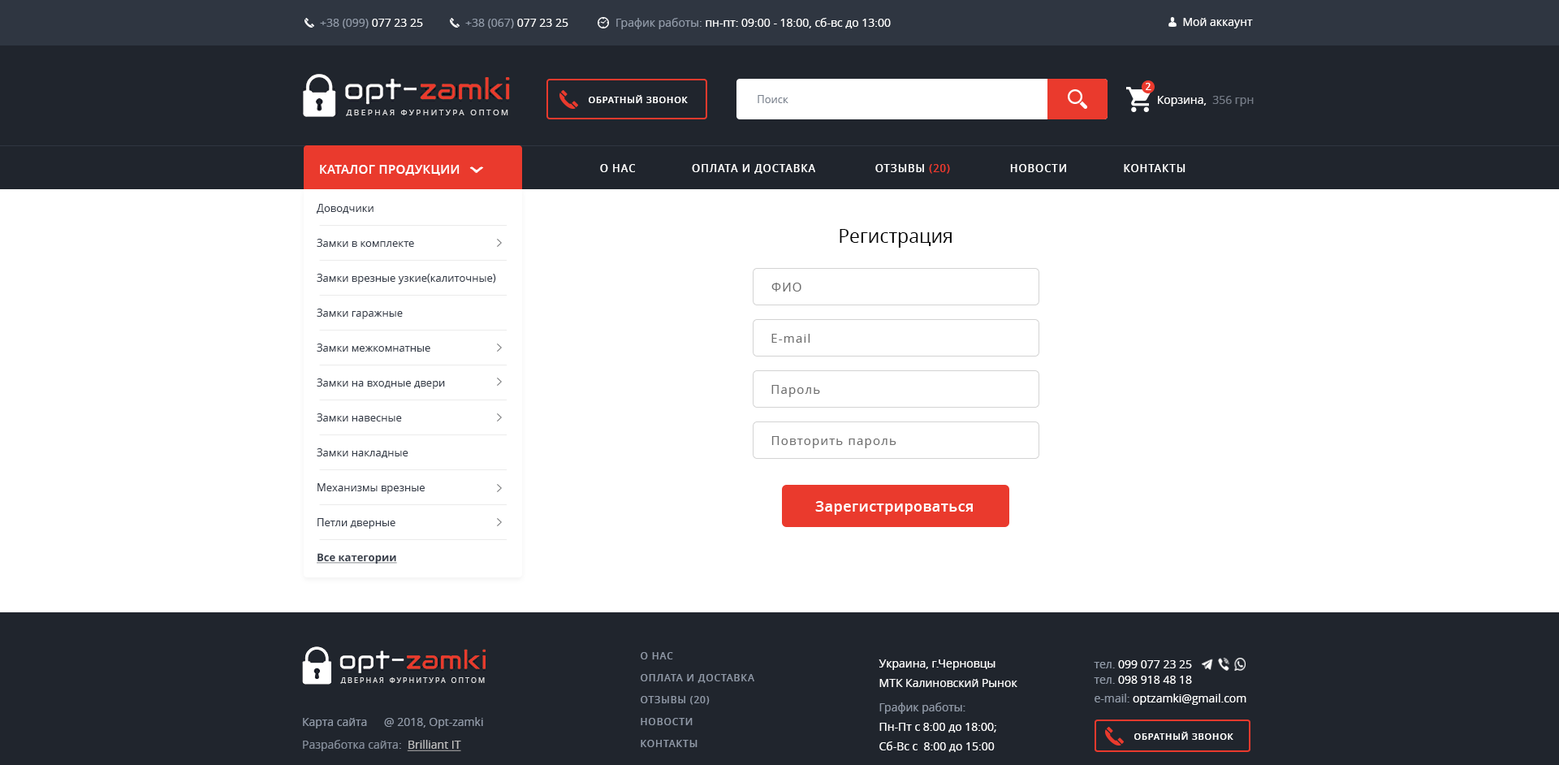
<style>
.page{position:relative;width:1559px;height:765px;background:#ffffff}
.page>*{position:absolute;margin:0}
.t1{font:11.4px "OpenSans";color:#ffffff}
.t2{font:11.4px "OpenSans";color:#9099a7}
.t3{font:9.8px "OpenSans-Semibold";color:#ffffff}
.t4{font:8.9px "OpenSans-Semibold";letter-spacing:0.075em;color:#ffffff;text-transform:uppercase}
.t5{font:10.6px "OpenSans";color:#79818d}
.t6{font:11.4px "OpenSans";color:#747b86}
.t7{font:8px "OpenSans";letter-spacing:0.26em;color:#dfdfe0;text-transform:uppercase}
.t8{font:12.2px "OpenSans-Semibold";letter-spacing:0.025em;color:#ffffff;text-transform:uppercase}
.t9{font:10.6px "OpenSans-Semibold";letter-spacing:0.07em;color:#ffffff;text-transform:uppercase}
.t10{font:10.6px "OpenSans-Semibold";letter-spacing:0.07em;color:#ea3a2d;text-transform:uppercase}
.t11{font:10.6px/34.9px "OpenSans";color:#373e4a}
.t12{font:10.6px/34.9px "OpenSans-Bold";color:#373e4a;text-decoration:underline}
.t13{font:18.6px "OpenSans";color:#000000}
.t14{font:12.2px "OpenSans";letter-spacing:0.075em;color:#6f6f6f}
.t15{font:14.6px "OpenSans-Semibold";letter-spacing:0.02em;color:#ffffff}
.t16{font:9.7px/21.9px "OpenSans-Semibold";letter-spacing:0.07em;color:#9099a7;text-transform:uppercase}
.t17{font:11.4px/19.5px "OpenSans";color:#ffffff}
.t18{font:11.4px/24.4px "OpenSans";color:#9099a7}
.t19{font:11.4px/18.7px "OpenSans";color:#ffffff}
.t20{font:11.4px/18.7px "OpenSans";color:#9099a7}
.t21{font:11.4px/15.4px "OpenSans";color:#ffffff}
.t22{font:11.4px/15.4px "OpenSans";color:#9099a7}
.t23{font:7.1px "OpenSans";letter-spacing:0.26em;color:#dfdfe0;text-transform:uppercase}
.t24{font:11.4px "OpenSans";color:#868f9c}
.t25{font:11.4px "OpenSans";color:#bebebe;text-decoration:underline}
</style>
<div class="page">
<p class="t1" style="left:616px;top:18px;width:275px;height:11px"><span class="t2">График работы: </span>пн-пт: 09:00 - 18:00, сб-вс до 13:00</p>
<p class="t1" style="left:1183px;top:18px;width:70px;height:10px">Мой аккаунт</p>
<p class="t2" style="left:320px;top:19px;width:103px;height:9px">+38 (099)<span class="t1"> 077 23 25</span></p>
<p class="t2" style="left:465px;top:19px;width:103px;height:9px">+38 (067)<span class="t1"> 077 23 25</span></p>
<p class="t3" style="left:1146px;top:83px;width:5px;height:7px">2</p>
<p class="t4" style="left:589px;top:95px;width:99px;height:8px">Обратный звонок</p>
<p class="t5" style="left:758px;top:95px;width:30px;height:8px">Поиск</p>
<p class="t1" style="left:1158px;top:96px;width:96px;height:10px">Корзина,  <span class="t6">356 грн</span></p>
<p class="t7" style="left:346px;top:110px;width:162px;height:6px">Дверная фурнитура оптом</p>
<p class="t8" style="left:320px;top:165px;width:140px;height:10px">каталог продукции</p>
<p class="t9" style="left:600px;top:164px;width:585px;height:10px">о нас                оплата и доставка                 Отзывы <span class="t10">(20) </span>                НОВОСТИ                Контакты</p>
<p class="t11" style="left:317px;top:204px;width:179px;height:360px">Доводчики<br>Замки в комплекте<br>Замки врезные узкие(калиточные)<br>Замки гаражные<br>Замки межкомнатные<br>Замки на входные двери<br>Замки навесные<br>Замки накладные<br>Механизмы врезные<br>Петли дверные<br><span class="t12">Все категории<br></span>Ручки защолка кноб<br>Ручки на планке<br>Ручки на розете<br>Сердцевины<br>Скобяные изделия<br>Уплотнитель<br>Хомуты пластиковые<br>Шпингалеты и дверные аксессуары</p>
<p class="t13" style="left:840px;top:229px;width:112px;height:19px">Регистрация</p>
<p class="t14" style="left:771px;top:283px;width:30px;height:8px">ФИО</p>
<p class="t14" style="left:771px;top:334px;width:39px;height:9px">E-mail</p>
<p class="t14" style="left:771px;top:385px;width:49px;height:12px">Пароль</p>
<p class="t14" style="left:771px;top:436px;width:125px;height:12px">Повторить пароль</p>
<p class="t15" style="left:815px;top:501px;width:158px;height:14px">Зарегистрироваться</p>
<p class="t16" style="left:641px;top:652px;width:113px;height:95px">о нас<br>оплата и доставка<br>Отзывы (20)<br>НОВОСТИ<br>Контакты</p>
<p class="t17" style="left:879px;top:659px;width:138px;height:93px">Украина, г.Черновцы<br>МТК Калиновский Рынок<br><span class="t18">График работы:<br></span>Пн-Пт с 8:00 до 18:00;<br>Сб-Вс с  8:00 до 15:00</p>
<p class="t19" style="left:1094px;top:660px;width:152px;height:45px"><span class="t20">тел.</span> 099 077 23 2<span class="t21">5<br></span><span class="t22">тел.</span><span class="t21"> 098 918 48 18<br></span><span class="t20">e-mail: </span>optzamki@gmail.com</p>
<p class="t23" style="left:340px;top:677px;width:145px;height:7px">Дверная фурнитура оптом</p>
<p class="t2" style="left:303px;top:718px;width:64px;height:10px">Карта сайта</p>
<p class="t2" style="left:384px;top:717px;width:99px;height:11px">@ 2018, Opt-zamki</p>
<p class="t4" style="left:1134px;top:732px;width:99px;height:8px">Обратный звонок</p>
<p class="t24" style="left:303px;top:740px;width:158px;height:11px">Разработка сайта:  <span class="t25">Brilliant IT</span></p>
</div>
